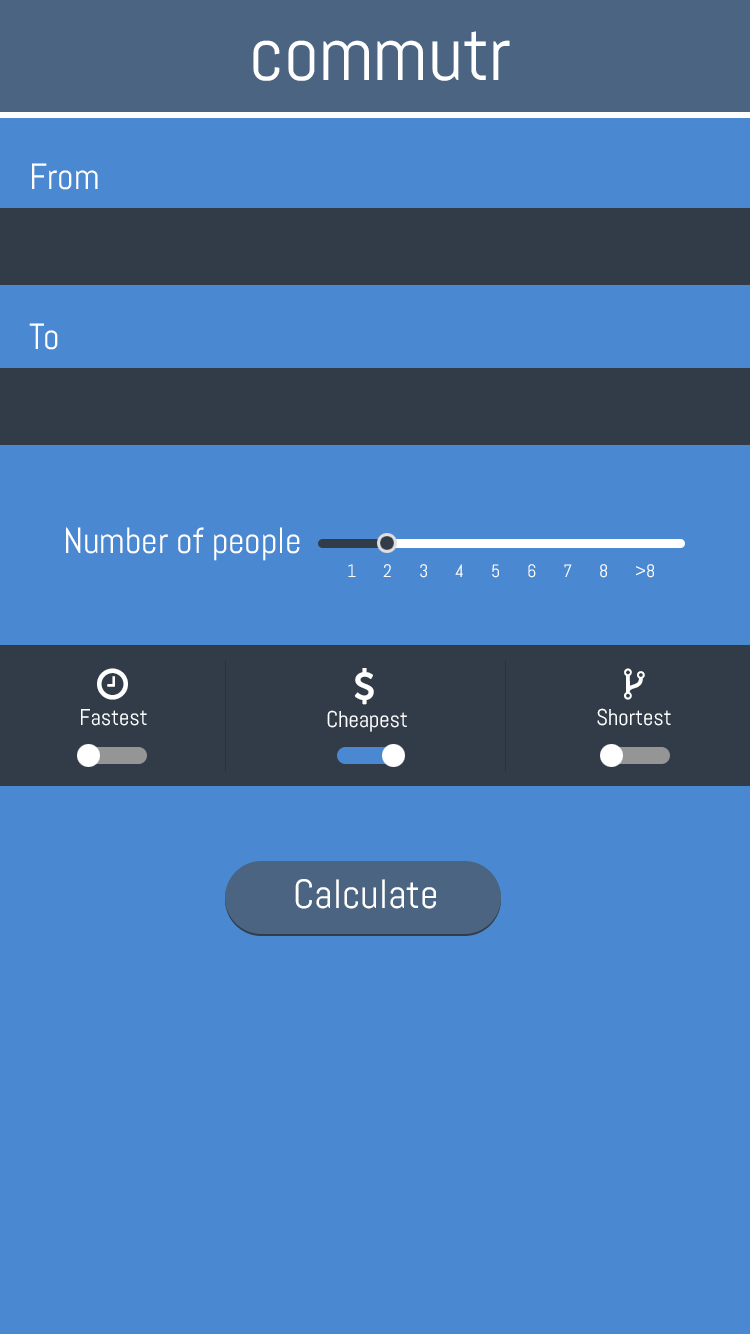
<style>
.page{position:relative;width:750px;height:1334px;background:#4a89d1}
.page>*{position:absolute;margin:0}
.t1{font:77px "Abel-Regular";color:#ffffff}
.t2{font:36.2px "Abel-Regular";color:#ffffff}
.t3{font:18.1px "Abel-Regular";color:#ffffff}
.t4{font:22.6px "Abel-Regular";color:#ffffff}
.t5{font:40.8px "Abel-Regular";color:#ffffff}
</style>
<div class="page">
<p class="t1" style="left:253px;top:31px;width:257px;height:50px">commutr</p>
<p class="t2" style="left:32px;top:163px;width:66px;height:27px">From</p>
<p class="t2" style="left:29px;top:323px;width:29px;height:27px">To</p>
<p class="t2" style="left:66px;top:527px;width:234px;height:34px">Number of people</p>
<p class="t3" style="left:348px;top:564px;width:306px;height:14px">1 2 3 4 5 6 7 8 &gt;8</p>
<p class="t4" style="left:81px;top:709px;width:66px;height:17px">Fastest</p>
<p class="t4" style="left:327px;top:710px;width:80px;height:22px">Cheapest</p>
<p class="t4" style="left:597px;top:708px;width:74px;height:18px">Shortest</p>
<p class="t5" style="left:295px;top:879px;width:141px;height:30px">Calculate</p>
</div>
